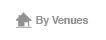
<style>
.page{position:relative;width:106px;height:40px;background:#ffffff}
.page>*{position:absolute;margin:0}
.t1{font:11px "Helvetica-Bold";letter-spacing:-0.025em;color:#919191}
</style>
<div class="page">
<p class="t1" style="left:36px;top:16px;width:53px;height:10px">By Venues</p>
</div>
